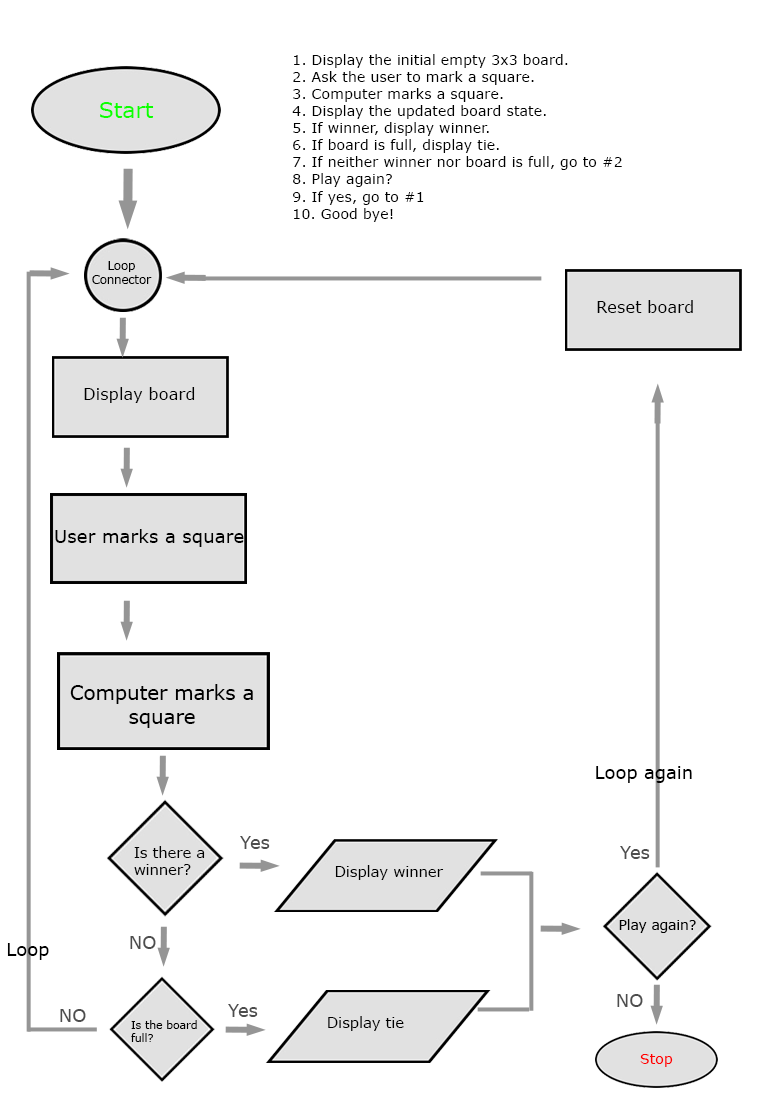
<style>
.page{position:relative;width:772px;height:1094px;background:#ffffff}
.page>*{position:absolute;margin:0}
.t1{font:14.3px "Verdana";color:#000000}
.t2{font:21.9px "Verdana";color:#0cff00}
.t3{font:11.6px "Verdana";color:#000000}
.t4{font:16.4px "Verdana";color:#000000}
.t5{font:18.2px "Verdana";color:#000000}
.t6{font:19.7px "Verdana";color:#000000}
.t7{font:18px "Verdana";color:#000000}
.t8{font:14.6px "Verdana";color:#000000}
.t9{font:18px "Verdana";color:#4d4d4d}
.t10{font:14.7px "Verdana";color:#000000}
.t11{font:13.6px "Verdana";color:#000000}
.t12{font:10.8px "Verdana";color:#000000}
.t13{font:14.2px "Verdana";color:#ff0000}
</style>
<div class="page">
<p class="t1" style="left:292px;top:54px;width:330px;height:168px">1. Display the initial empty 3x3 board.<br>2. Ask the user to mark a square.<br>3. Computer marks a square.<br>4. Display the updated board state.<br>5. If winner, display winner.<br>6. If board is full, display tie.<br>7. If neither winner nor board is full, go to #2<br>8. Play again?<br>9. If yes, go to #1<br>10. Good bye!</p>
<p class="t2" style="left:100px;top:102px;width:54px;height:16px">Start</p>
<p class="t3" style="left:92px;top:261px;width:60px;height:23px;text-align:center">Loop<br>Connector</p>
<p class="t4" style="left:597px;top:300px;width:96px;height:13px">Reset board</p>
<p class="t4" style="left:84px;top:387px;width:111px;height:16px">Display board</p>
<p class="t5" style="left:55px;top:529px;width:189px;height:18px">User marks a square</p>
<p class="t6" style="left:70px;top:684px;width:183px;height:44px;text-align:center">Computer marks a<br>square</p>
<p class="t7" style="left:596px;top:766px;width:96px;height:17px">Loop again</p>
<p class="t8" style="left:134px;top:846px;width:71px;height:29px">Is there a<br>winner?</p>
<p class="t9" style="left:240px;top:836px;width:30px;height:13px">Yes</p>
<p class="t9" style="left:620px;top:846px;width:30px;height:13px">Yes</p>
<p class="t10" style="left:335px;top:865px;width:109px;height:15px">Display winner</p>
<p class="t11" style="left:619px;top:919px;width:77px;height:14px">Play again?</p>
<p class="t9" style="left:130px;top:936px;width:26px;height:13px">NO</p>
<p class="t7" style="left:7px;top:943px;width:42px;height:17px">Loop</p>
<p class="t9" style="left:617px;top:994px;width:26px;height:13px">NO</p>
<p class="t9" style="left:60px;top:1009px;width:26px;height:13px">NO</p>
<p class="t9" style="left:228px;top:1004px;width:30px;height:13px">Yes</p>
<p class="t12" style="left:131px;top:1020px;width:66px;height:22px">Is the board<br>full?</p>
<p class="t10" style="left:328px;top:1016px;width:76px;height:15px">Display tie</p>
<p class="t13" style="left:640px;top:1054px;width:33px;height:13px">Stop</p>
</div>
